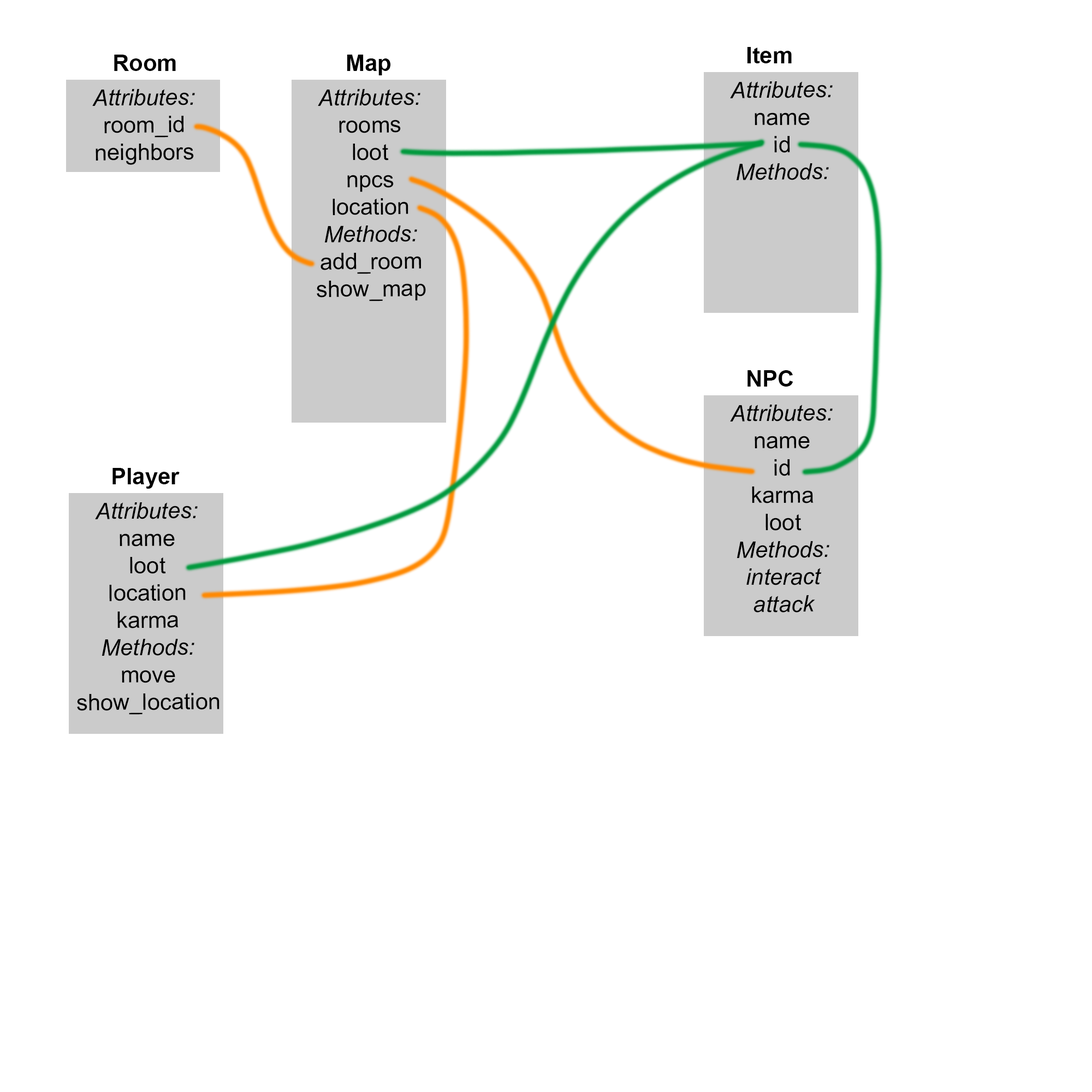
<style>
.page{position:relative;width:1092px;height:1092px;background:#ffffff}
.page>*{position:absolute;margin:0}
.t1{font:22.7px "Arial-BoldMT";color:#000000}
.t2{font:22.7px "ArialMT";color:#000000}
.t3{font:22.7px "Arial-ItalicMT";color:#000000}
</style>
<div class="page">
<p class="t1" style="left:747px;top:47px;width:45px;height:16px">Item</p>
<p class="t1" style="left:114px;top:55px;width:62px;height:16px">Room</p>
<p class="t1" style="left:347px;top:55px;width:44px;height:20px">Map</p>
<p class="t2" style="left:92px;top:89px;width:103px;height:76px;text-align:center;rotate:-1deg"><span class="t3">Attributes:<br></span>room_id<br>neighbors</p>
<p class="t2" style="left:317px;top:89px;width:109px;height:212px;text-align:center;rotate:-1deg"><span class="t3">Attributes:<br></span>rooms<br>loot<br>npcs<br>location<br><span class="t3">Methods:<br></span>add_room<br>show_map</p>
<p class="t3" style="left:730px;top:81px;width:103px;height:99px;text-align:center;rotate:-1deg">Attributes:<br><span class="t2">name<br>id<br></span>Methods:</p>
<p class="t1" style="left:747px;top:370px;width:46px;height:17px">NPC</p>
<p class="t3" style="left:730px;top:405px;width:103px;height:208px;text-align:center;rotate:-1deg">Attributes:<br><span class="t2">name<br>id<br>karma<br>loot<br></span>Methods:<br>interact<br>attack</p>
<p class="t1" style="left:112px;top:468px;width:68px;height:21px">Player</p>
<p class="t2" style="left:77px;top:502px;width:142px;height:213px;text-align:center;rotate:-1deg"><span class="t3">Attributes:<br></span>name<br>loot<br>location<br>karma<br><span class="t3">Methods:</span><br>move<br>show_location</p>
</div>
